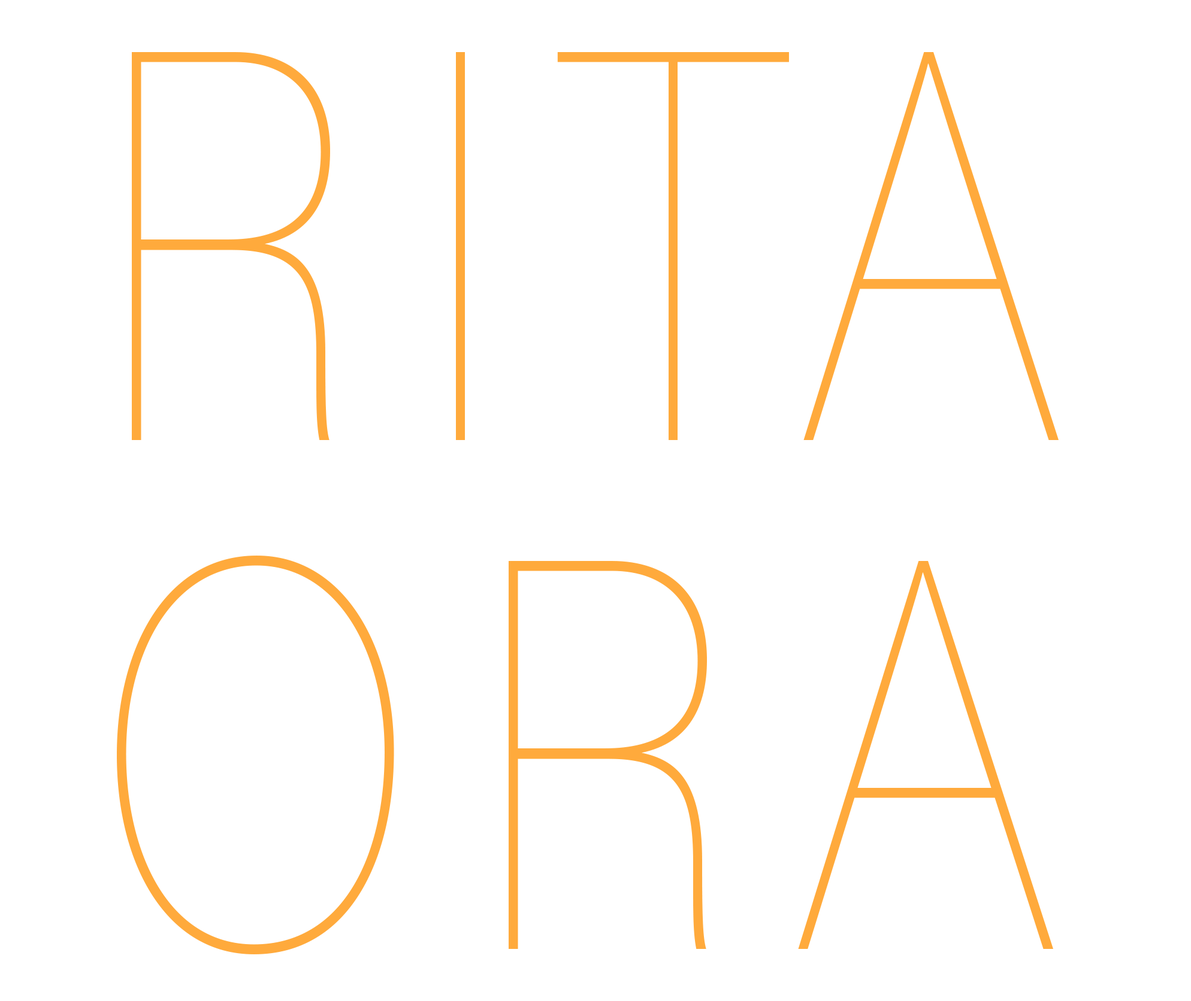
<style>
.page{position:relative;width:1191px;height:1001px;background:#ffffff}
.page>*{position:absolute;margin:0}
.t1{font:551.5px "AcuminPro-Thin";letter-spacing:0.1em;color:#ffaa3c;scale:0.81 1}
</style>
<div class="page">
<p class="t1" style="left:117px;top:52px;width:941px;height:903px;text-align:center">RITA<br>ORA</p>
</div>
